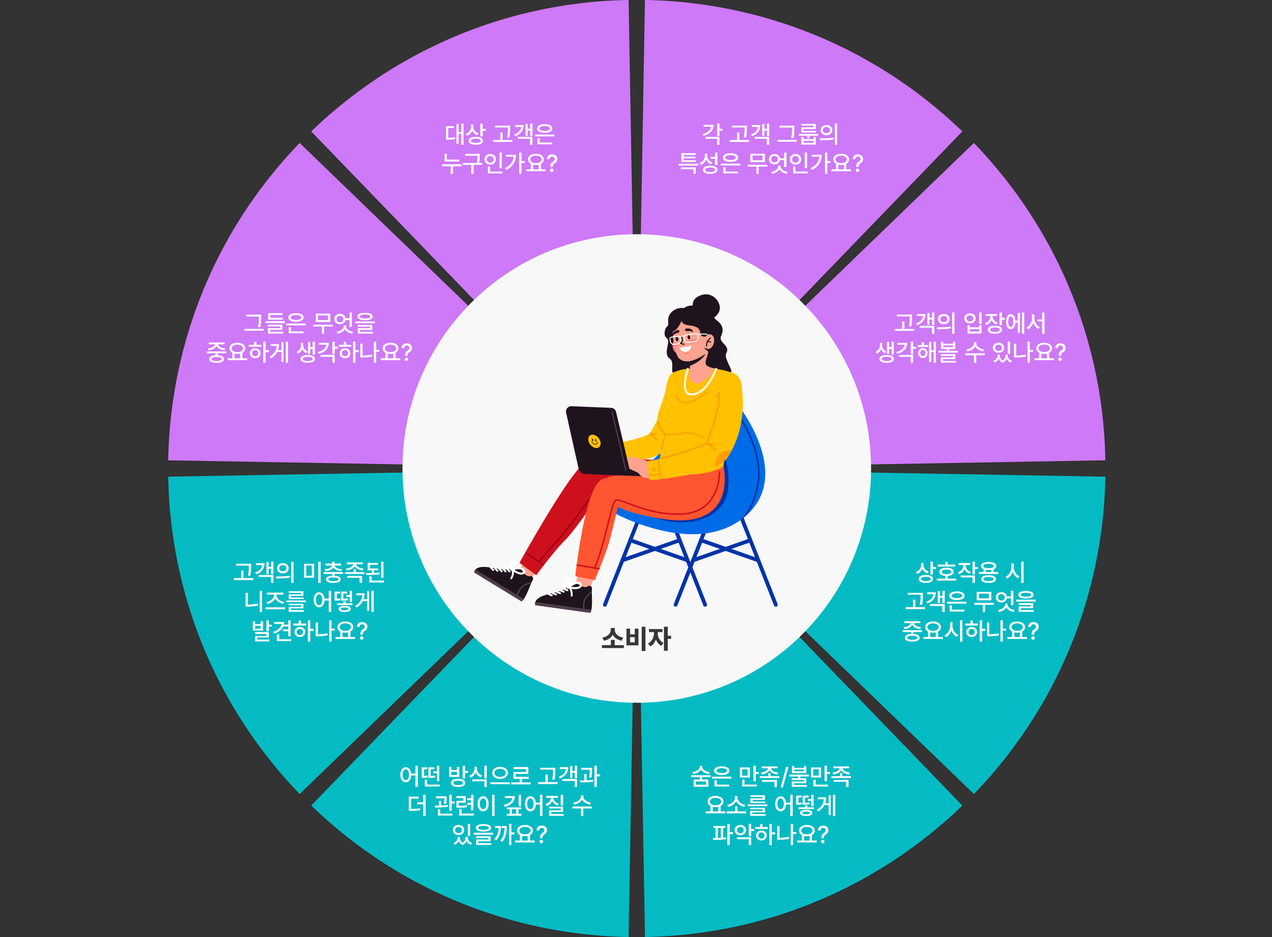
<style>
.page{position:relative;width:1272px;height:937px;background:#333333}
.page>*{position:absolute;margin:0}
.t1{font:24.3px "Pretendard-Medium";color:#ffffff;text-transform:uppercase}
.t2{font:27px "Pretendard-ExtraBold";color:#373737;text-transform:uppercase}
</style>
<div class="page">
<p class="t1" style="left:442px;top:124px;width:116px;height:50px;text-align:center">대상 고객은<br>누구인가요?</p>
<p class="t1" style="left:679px;top:124px;width:185px;height:50px;text-align:center">각 고객 그룹의<br>특성은 무엇인가요?</p>
<p class="t1" style="left:207px;top:313px;width:205px;height:50px;text-align:center">그들은 무엇을<br>중요하게 생각하나요?</p>
<p class="t1" style="left:875px;top:313px;width:191px;height:50px;text-align:center">고객의 입장에서<br>생각해볼 수 있나요?</p>
<p class="t1" style="left:234px;top:562px;width:150px;height:80px;text-align:center">고객의 미충족된<br>니즈를 어떻게<br>발견하나요?</p>
<p class="t1" style="left:902px;top:562px;width:137px;height:80px;text-align:center">상호작용 시<br>고객은 무엇을<br>중요시하나요?</p>
<p class="t2" style="left:602px;top:627px;width:69px;height:24px">소비자</p>
<p class="t1" style="left:400px;top:766px;width:200px;height:79px;text-align:center">어떤 방식으로 고객과<br>더 관련이 깊어질 수<br>있을까요?</p>
<p class="t1" style="left:691px;top:766px;width:160px;height:79px;text-align:center">숨은 만족/불만족<br>요소를 어떻게<br>파악하나요?</p>
</div>
